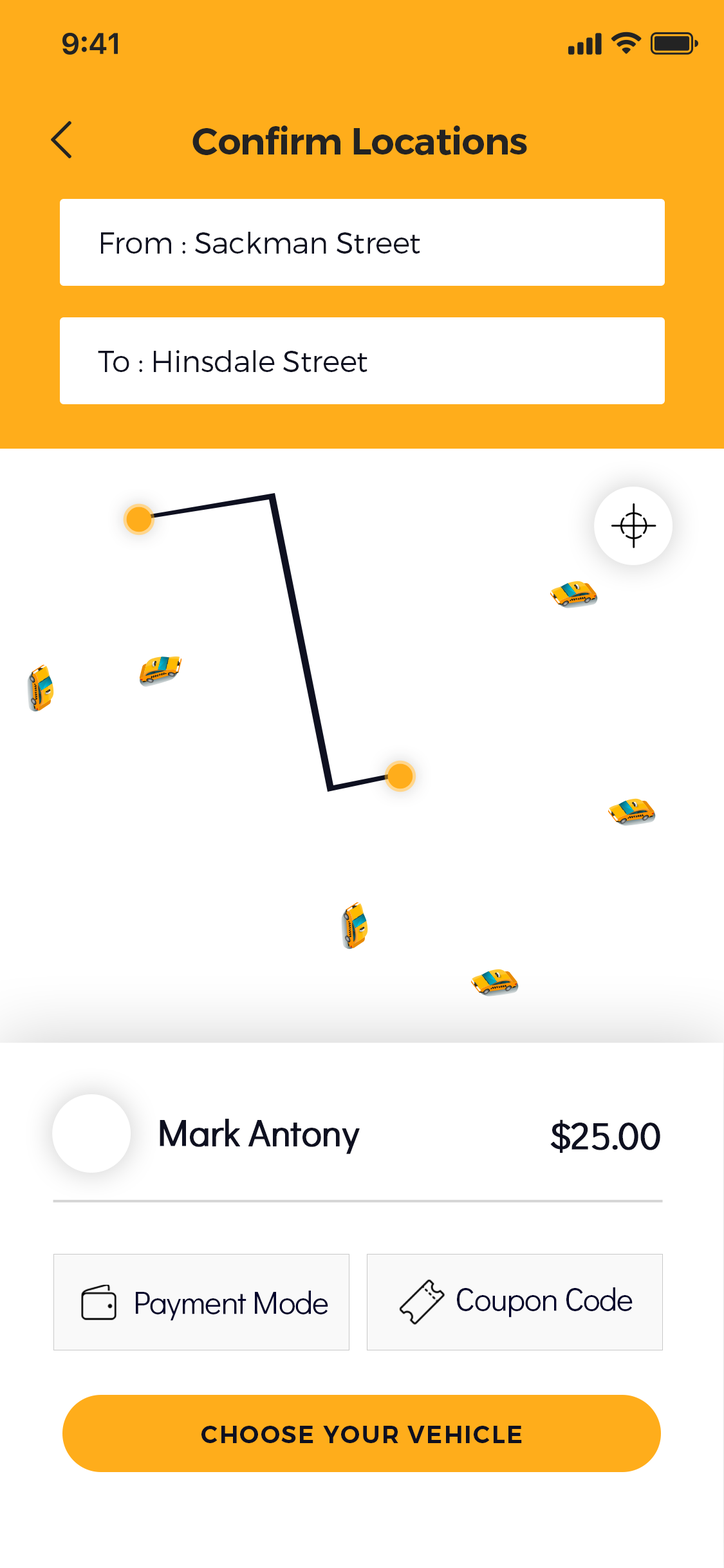
<style>
.page{position:relative;width:724px;height:1568px;background:#ffffff}
.page>*{position:absolute;margin:0}
.t1{font:37.5px "Montserrat-SemiBold";letter-spacing:-0.02em;color:#232323}
.t2{font:29.5px "Montserrat-Light";letter-spacing:-0.01em;color:#0e1020}
.t3{font:37.5px "DidactGothic-Regular";letter-spacing:-0.02em;color:#0e1020;font-weight:bold}
.t4{font:32.2px "DidactGothic-Regular";letter-spacing:-0.02em;color:#03032b}
.t5{font:24.1px "Montserrat-SemiBold";letter-spacing:0.06em;color:#0e1020;text-transform:uppercase}
</style>
<div class="page">
<p class="t1" style="left:192px;top:126px;width:335px;height:29px">Confirm Locations</p>
<p class="t2" style="left:101px;top:232px;width:319px;height:22px">From : Sackman Street</p>
<p class="t2" style="left:98px;top:350px;width:270px;height:22px">To : Hinsdale Street</p>
<p class="t3" style="left:160px;top:1119px;width:200px;height:35px">Mark Antony</p>
<p class="t3" style="left:550px;top:1119px;width:110px;height:34px">$25.00</p>
<p class="t4" style="left:457px;top:1287px;width:176px;height:31px">Coupon Code</p>
<p class="t4" style="left:136px;top:1291px;width:192px;height:30px">Payment Mode</p>
<p class="t5" style="left:201px;top:1426px;width:321px;height:17px">CHOOSE YOUR VEHICLE</p>
</div>
